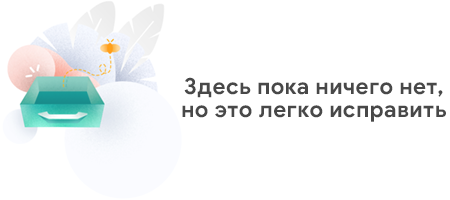
<style>
.page{position:relative;width:450px;height:200px;background:#ffffff}
.page>*{position:absolute;margin:0}
.t1{font:22.2px/23.2px "GoogleSans-Bold";letter-spacing:0.02em;color:#484848}
</style>
<div class="page">
<p class="t1" style="left:182px;top:77px;width:264px;height:45px;text-align:center">Здесь пока ничего нет,<br>но это легко исправить</p>
</div>
